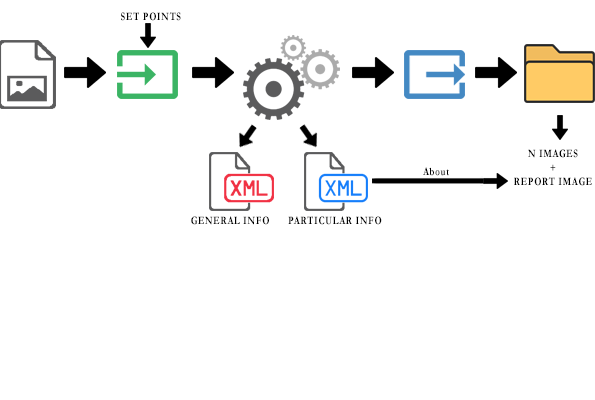
<style>
.page{position:relative;width:595px;height:400px;background:#ffffff}
.page>*{position:absolute;margin:0}
.t1{font:11.2px "Garamond-Bold";letter-spacing:0.07em;color:#000000;scale:0.81 1}
.t2{font:11.2px/14px "Garamond-Bold";letter-spacing:0.07em;color:#000000;scale:0.81 1}
</style>
<div class="page">
<p class="t1" style="left:121px;top:12px;width:60px;height:9px">SET POINTS</p>
<p class="t2" style="left:514px;top:149px;width:78px;height:37px;text-align:center">N IMAGES<br>+<br>REPORT IMAGE</p>
<p class="t1" style="left:423px;top:167px;width:26px;height:9px">About</p>
<p class="t1" style="left:191px;top:216px;width:78px;height:9px">GENERAL INFO</p>
<p class="t1" style="left:288px;top:216px;width:94px;height:9px">PARTICULAR INFO</p>
</div>
